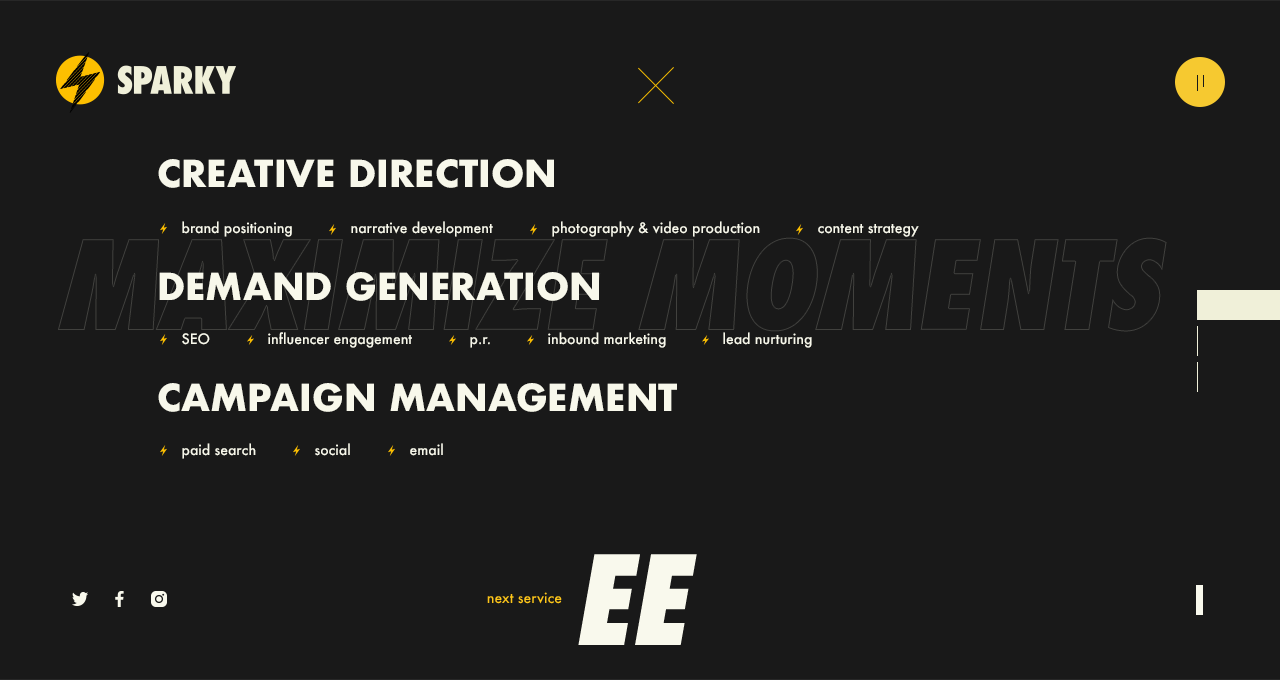
<style>
.page{position:relative;width:1280px;height:680px;background:#191919}
.page>*{position:absolute;margin:0}
.t1{font:36px "Futura-Bold";color:#f8f8eb}
.t2{font:14px "Futura-Medium";color:#f8f8eb}
.t3{font:120px "Futura-CondensedExtraBold";color:#f8f8eb;text-transform:uppercase;font-style:italic}
.t4{font:14px "Futura-Medium";color:#fdc519}
</style>
<div class="page">
<p class="t1" style="left:158px;top:159px;width:396px;height:29px">CREATIVE DIRECTION</p>
<p class="t2" style="left:182px;top:221px;width:110px;height:16px">brand positioning</p>
<p class="t2" style="left:351px;top:221px;width:142px;height:16px">narrative development</p>
<p class="t2" style="left:552px;top:221px;width:208px;height:16px">photography &amp; video production</p>
<p class="t2" style="left:818px;top:224px;width:101px;height:13px">content strategy</p>
<p class="t1" style="left:159px;top:272px;width:440px;height:29px">DEMAND GENERATION</p>
<p class="t2" style="left:182px;top:333px;width:28px;height:12px">SEO</p>
<p class="t2" style="left:268px;top:332px;width:144px;height:16px">influencer engagement</p>
<p class="t2" style="left:470px;top:337px;width:20px;height:11px">p.r.</p>
<p class="t2" style="left:548px;top:332px;width:118px;height:16px">inbound marketing</p>
<p class="t2" style="left:723px;top:332px;width:89px;height:16px">lead nurturing</p>
<p class="t1" style="left:158px;top:383px;width:519px;height:29px">CAMPAIGN MANAGEMENT</p>
<p class="t2" style="left:182px;top:443px;width:74px;height:16px">paid search</p>
<p class="t2" style="left:315px;top:443px;width:35px;height:13px">social</p>
<p class="t2" style="left:410px;top:443px;width:33px;height:13px">email</p>
<p class="t3" style="left:578px;top:554px;width:119px;height:91px">EE</p>
<p class="t4" style="left:487px;top:592px;width:75px;height:12px">next service</p>
</div>
